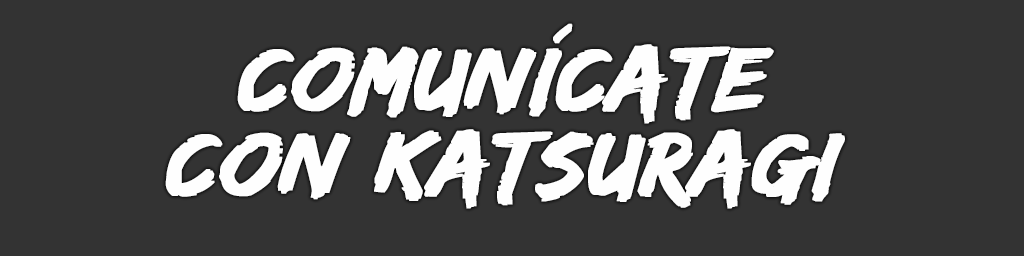
<style>
.page{position:relative;width:1024px;height:256px;background:#333333}
.page>*{position:absolute;margin:0}
.t1{font:94px/85px "EdoSZ";color:#fefefe;font-weight:bold;font-style:italic;scale:1.04 1}
</style>
<div class="page">
<p class="t1" style="left:165px;top:23px;width:680px;height:186px;text-align:center">comunícate<br>con katsuragi</p>
</div>
